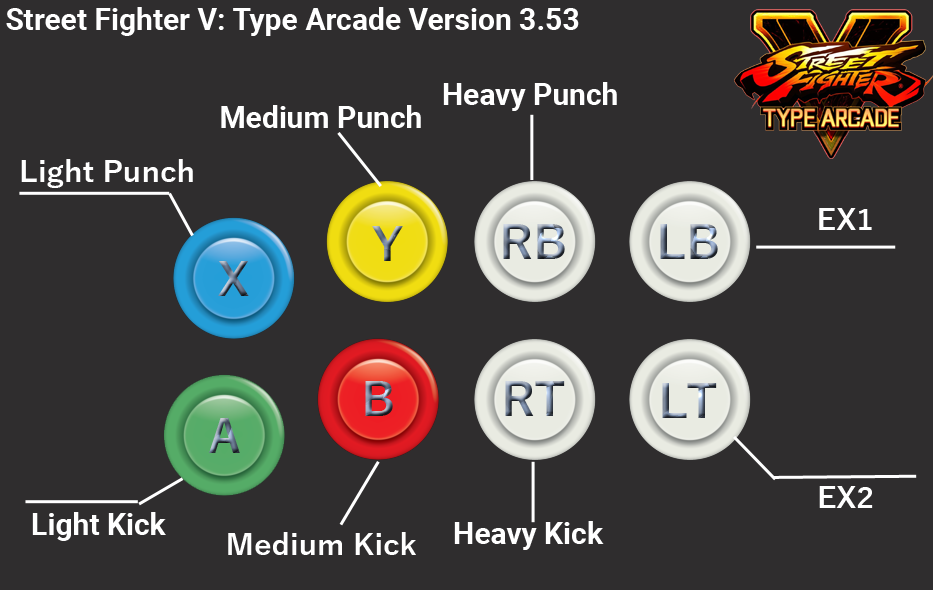
<style>
.page{position:relative;width:933px;height:590px;background:#2f2d2e}
.page>*{position:absolute;margin:0}
.t1{font:30px "Roboto-Bold";color:#ffffff}
.t2{font:30px "YuGothic-Bold";color:#ffffff}
</style>
<div class="page">
<p class="t1" style="left:6px;top:7px;width:573px;height:29px">Street Fighter V: Type Arcade Version 3.53</p>
<p class="t1" style="left:443px;top:82px;width:174px;height:29px">Heavy Punch</p>
<p class="t1" style="left:221px;top:105px;width:200px;height:23px">Medium Punch</p>
<p class="t2" style="left:21px;top:159px;width:172px;height:29px">Light Punch</p>
<p class="t2" style="left:819px;top:208px;width:53px;height:22px">EX1</p>
<p class="t2" style="left:819px;top:486px;width:54px;height:22px">EX2</p>
<p class="t1" style="left:32px;top:512px;width:134px;height:29px">Light Kick</p>
<p class="t1" style="left:454px;top:521px;width:150px;height:29px">Heavy Kick</p>
<p class="t2" style="left:228px;top:532px;width:188px;height:23px">Medium Kick</p>
</div>
